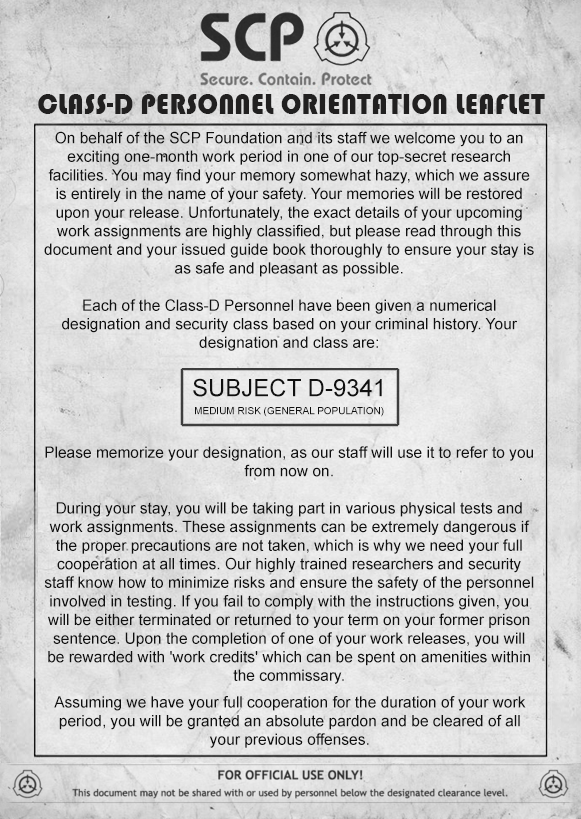
<style>
.page{position:relative;width:581px;height:819px}
.page>*{position:absolute;margin:0}
.t1{font:30.3px "Bauhaus93";letter-spacing:0.01em;color:#212020;scale:0.9 1}
.t2{font:15.5px "ArialMT";color:#101010}
.t3{font:15.5px/18px "ArialMT";color:#101010}
.t4{font:10px/18px "ArialMT";color:#101010}
.t5{font:24px/18px "ArialMT";color:#101010}
</style>
<div class="page">
<p class="t1" style="left:38px;top:94px;width:507px;height:20px">CLASS-D PERSONNEL ORIENTATION LEAFLET</p>
<p class="t2" style="left:44px;top:131px;width:490px;height:553px;text-align:center">On behalf of the SCP Foundation and its staff we welcome you to an exciting one-month work period in one of our top-secret research facilities. You may find your memory somewhat hazy, which we assure is entirely in the name of your safety. Your memories will be restored upon your release. Unfortunately, the exact details of your upcoming work assignments are highly classified, but please read through this document and your issued guide book thoroughly to ensure your stay is as safe and pleasant as possible.<br><br>Each of the Class-D Personnel have been given a numerical designation and security class based on your criminal history. Your designation and class are:<br><br><br><br><span class="t3"><br><br>Please memorize your designation, as our staff will use it to refer to you </span>from now on.<br><br>During your stay, you will be taking part in various physical tests and work assignments. These assignments can be extremely dangerous if the proper precautions are not taken, which is why we need your full cooperation at all times. Our highly trained researchers and security staff know how to minimize risks and ensure the safety of the personnel involved in testing. If you fail to comply with the instructions given, you will be either terminated or returned to your term on your former prison sentence. Upon the completion of one of your work releases, you will be rewarded with 'work credits' which can be spent on amenities within the commissary.</p>
<p class="t4" style="left:193px;top:378px;width:191px;height:39px;text-align:center"><span class="t5">SUBJECT D-9341<br></span>MEDIUM RISK (GENERAL POPULATION)</p>
<p class="t2" style="left:54px;top:696px;width:472px;height:52px;text-align:center">Assuming we have your full cooperation for the duration of your work period, you will be granted an absolute pardon and be cleared of all your previous offenses.</p>
</div>
